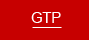
<style>
.page{position:relative;width:89px;height:40px;background:#c70000}
.page>*{position:absolute;margin:0}
.t1{font:14.7px "ArialMT";color:#ffffff}
</style>
<div class="page">
<p class="t1" style="left:31px;top:12px;width:30px;height:11px">GTP</p>
</div>
